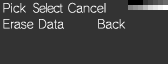
<style>
.page{position:relative;width:168px;height:64px;background:#333333}
.page>*{position:absolute;margin:0}
.t1{font:12px/16px "RodinNTLGPro-L";color:#ffffff}
.t2{font:12px/16px "RodinNTLGPro-L";letter-spacing:-0.06em;color:#ffffff;scale:0.9 1}
.t3{font:12px/16px "RodinNTLGPro-L";letter-spacing:-0.06em;color:#ffffff}
</style>
<div class="page">
<p class="t1" style="left:3px;top:2px;width:123px;height:27px">Pick  <span class="t2">S</span><span class="t3">elect  </span>Cancel<br>Erase Data        Back</p>
</div>
